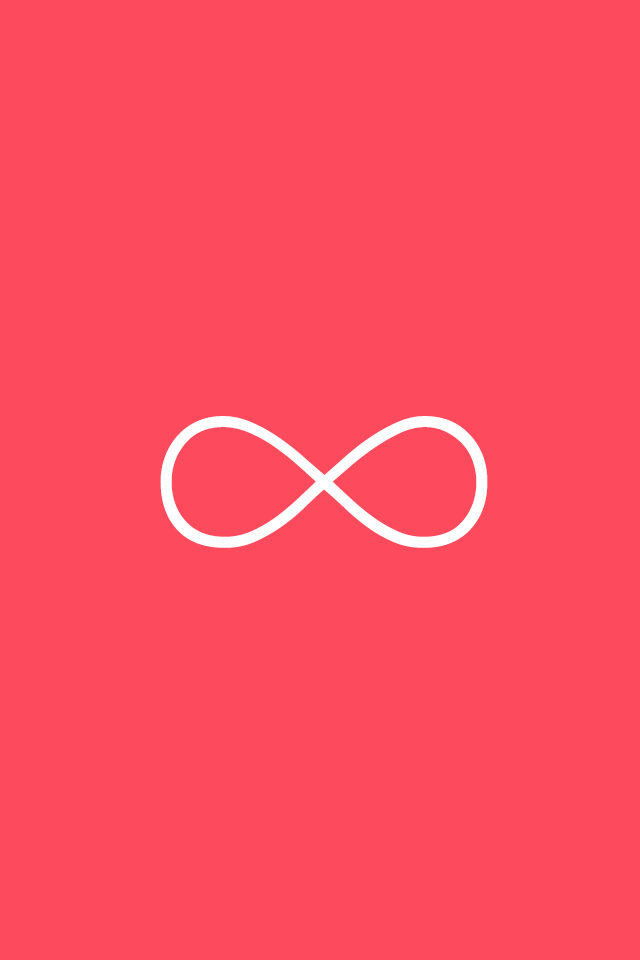
<style>
.page{position:relative;width:640px;height:960px;background:#fe4a5d}
.page>*{position:absolute;margin:0}
.t1{font:531.9px "HelveticaNeue-UltraLight";color:#ffffff}
</style>
<div class="page">
<p class="t1" style="left:160px;top:416px;width:328px;height:132px">∞</p>
</div>
